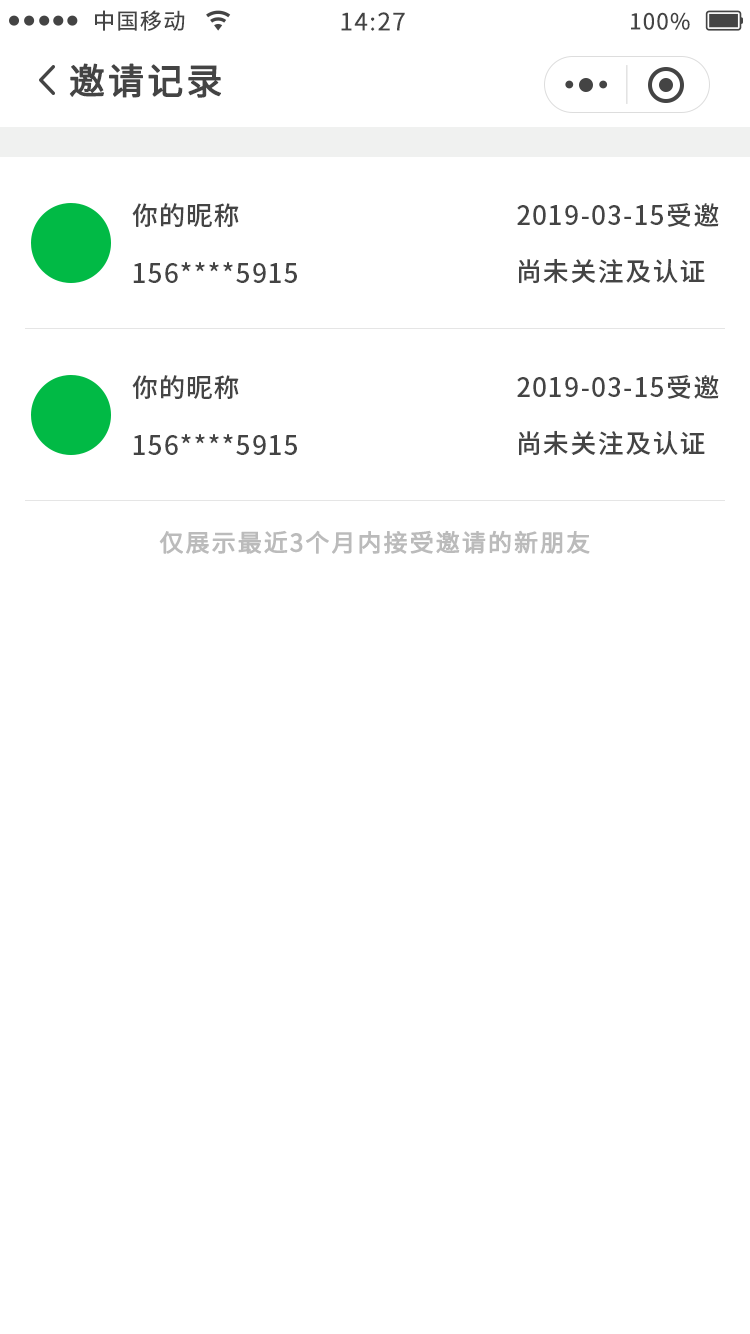
<style>
.page{position:relative;width:750px;height:1334px;background:#ffffff}
.page>*{position:absolute;margin:0}
.t1{font:22px "NotoSansCJKsc-Regular";letter-spacing:0.06em;color:#444444}
.t2{font:24px "NotoSansCJKsc-Regular";letter-spacing:0.06em;color:#444444}
.t3{font:36px "NotoSansCJKsc-Regular";letter-spacing:0.06em;color:#444444;font-weight:bold}
.t4{font:26px "SourceHanSansSC-Medium";letter-spacing:0.05em;color:#444444}
.t5{font:24px "NotoSansCJKsc-Regular";letter-spacing:0.06em;color:#bbbbbb;font-weight:bold}
</style>
<div class="page">
<p class="t1" style="left:95px;top:10px;width:90px;height:21px">中国移动</p>
<p class="t2" style="left:341px;top:12px;width:64px;height:19px">14:27</p>
<p class="t1" style="left:631px;top:12px;width:59px;height:18px">100%</p>
<p class="t3" style="left:69px;top:63px;width:152px;height:35px">邀请记录</p>
<p class="t4" style="left:132px;top:203px;width:107px;height:25px">你的昵称</p>
<p class="t4" style="left:517px;top:203px;width:202px;height:24px">2019-03-15受邀</p>
<p class="t4" style="left:133px;top:262px;width:164px;height:21px">156****5915</p>
<p class="t4" style="left:519px;top:258px;width:186px;height:26px">尚未关注及认证</p>
<p class="t4" style="left:132px;top:375px;width:107px;height:25px">你的昵称</p>
<p class="t4" style="left:517px;top:375px;width:202px;height:24px">2019-03-15受邀</p>
<p class="t4" style="left:133px;top:434px;width:164px;height:21px">156****5915</p>
<p class="t4" style="left:519px;top:430px;width:186px;height:26px">尚未关注及认证</p>
<p class="t5" style="left:159px;top:530px;width:431px;height:24px">仅展示最近3个月内接受邀请的新朋友</p>
</div>
